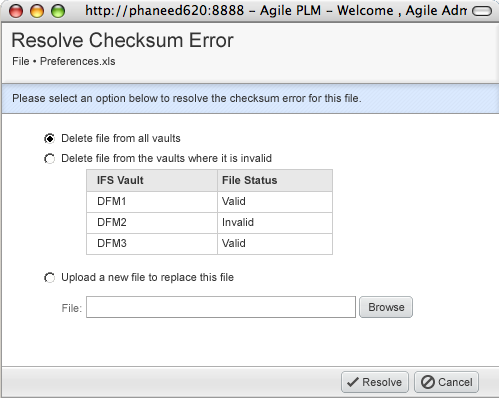
<style>
.page{position:relative;width:499px;height:398px;background:#ffffff}
.page>*{position:absolute;margin:0}
.t1{font:20px "ArialMT";color:#333333}
.t2{font:11px "ArialMT";color:#333333}
.t3{font:11px/21px "ArialMT";color:#333333}
.t4{font:11px/21px "Arial-BoldMT";color:#333333}
.t5{font:11px "ArialMT";color:#666666}
</style>
<div class="page">
<p class="t1" style="left:12px;top:32px;width:222px;height:16px">Resolve Checksum Error</p>
<p class="t2" style="left:13px;top:57px;width:102px;height:8px">File • Preferences.xls</p>
<p class="t2" style="left:13px;top:94px;width:348px;height:11px">Please select an option below to resolve the checksum error for this file.</p>
<p class="t2" style="left:62px;top:134px;width:119px;height:8px">Delete file from all vaults</p>
<p class="t2" style="left:62px;top:154px;width:210px;height:8px">Delete file from the vaults where it is invalid</p>
<p class="t3" style="left:97px;top:176px;width:47px;height:71px"><span class="t4">IFS Vault<br></span>DFM1<br>DFM2<br>DFM3</p>
<p class="t3" style="left:222px;top:176px;width:55px;height:71px"><span class="t4">File Status<br></span>Valid<br>Invalid<br>Valid</p>
<p class="t2" style="left:62px;top:273px;width:172px;height:11px">Upload a new file to replace this file</p>
<p class="t5" style="left:62px;top:304px;width:20px;height:8px">File:</p>
<p class="t2" style="left:369px;top:303px;width:36px;height:8px">Browse</p>
<p class="t2" style="left:363px;top:378px;width:39px;height:8px">Resolve</p>
<p class="t2" style="left:438px;top:378px;width:34px;height:8px">Cancel</p>
</div>
